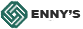
<style>
.page{position:relative;width:83px;height:29px;background:#ffffff}
.page>*{position:absolute;margin:0}
.t1{font:11.2px "Arial-Black";color:#2b2b2b;text-transform:uppercase;scale:1.06 1}
</style>
<div class="page">
<p class="t1" style="left:31px;top:10px;width:50px;height:8px">Enny’s</p>
</div>
